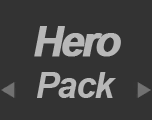
<style>
.page{position:relative;width:152px;height:120px;background:#333333}
.page>*{position:absolute;margin:0}
.t1{font:42.3px "Arial-BoldMT";letter-spacing:-0.1em;color:#b8b8b8;font-weight:bold;font-style:italic}
.t2{font:36px "Arial-BoldItalicMT";letter-spacing:-0.05em;color:#b8b8b8}
</style>
<div class="page">
<p class="t1" style="left:34px;top:26px;width:87px;height:31px">Hero</p>
<p class="t2" style="left:37px;top:72px;width:79px;height:26px">Pack</p>
</div>
